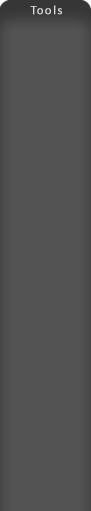
<style>
.page{position:relative;width:91px;height:511px;background:#535353}
.page>*{position:absolute;margin:0}
.t1{font:12.5px "Calibri-Light";letter-spacing:0.1em;color:#dddddd;font-weight:bold}
</style>
<div class="page">
<p class="t1" style="left:30px;top:5px;width:32px;height:10px">Tools</p>
</div>
